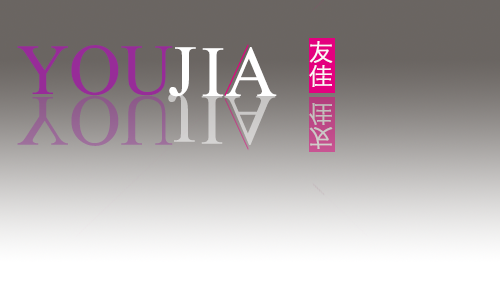
<style>
.page{position:relative;width:500px;height:300px}
.page>*{position:absolute;margin:0}
.t1{font:72px "TimesNewRomanPSMT";color:#972c98}
.t2{font:72px "TimesNewRomanPSMT";color:#ffffff}
.t3{font:72px "TimesNewRomanPSMT";color:#956492}
.t4{font:72px "TimesNewRomanPSMT";color:#cccbca}
.t5{font:72px "TimesNewRomanPSMT";color:#cbc9c8}
</style>
<div class="page">
<p class="t1" style="left:17px;top:45px;width:156px;height:51px">YOU</p>
<p class="t2" style="left:169px;top:47px;width:27px;height:50px">J</p>
<p class="t2" style="left:202px;top:47px;width:75px;height:49px">IA</p>
<p class="t3" style="left:17px;top:95px;width:156px;height:51px">YOU</p>
<p class="t4" style="left:168px;top:92px;width:27px;height:50px">J</p>
<p class="t5" style="left:201px;top:96px;width:75px;height:49px">IA</p>
</div>
